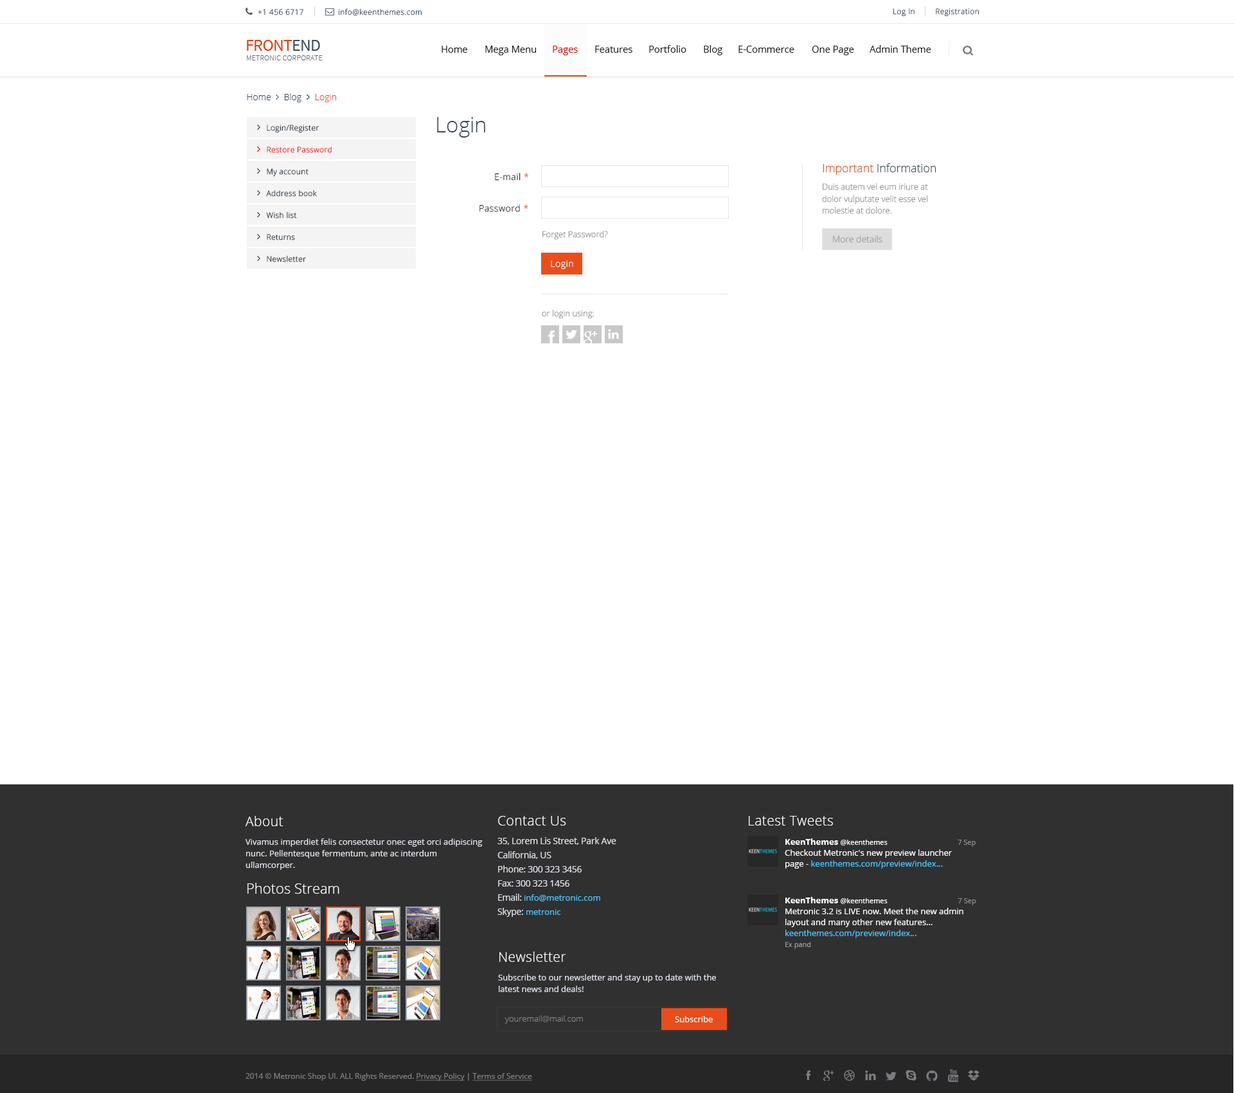
<style>
.page{position:relative;width:1234px;height:1093px;background:#ffffff}
.page>*{position:absolute;margin:0}
.t1{font:7.7px "OpenSans-Light";letter-spacing:0.04em;color:#394c60}
.t2{font:9.4px "OpenSans";color:#1f1c1c}
.t3{font:9.4px "OpenSans";color:#dd0000}
.t4{font:9px "OpenSans-Light";color:#394c60}
.t5{font:9px "OpenSans-Light";color:#e94d1c}
.t6{font:7.7px "OpenSans-Light";letter-spacing:0.03em;color:#394753}
.t7{font:21.2px "OpenSans-Light";color:#3a4855}
.t8{font:7.7px "OpenSans-Light";letter-spacing:0.03em;color:#ff0000}
.t9{font:9px "OpenSans-Light";letter-spacing:0.04em}
.t10{font:11.4px "OpenSans-Light";color:#3a4855}
.t11{font:11.4px "OpenSans-Light";color:#e94d1c}
.t12{font:8.4px/12px "OpenSans-Light";color:#999999}
.t13{font:8.4px "OpenSans-Light";color:#999999}
.t14{font:9px "OpenSans-Light";color:#999999}
.t15{font:9px "OpenSans-Light";letter-spacing:0.04em;color:#ffffff}
.t16{font:13.5px "OpenSans-Light";letter-spacing:0.02em;color:#fefefe}
.t17{font:13.5px "OpenSans-Light";letter-spacing:0.02em;color:#ffffff}
.t18{font:8.4px/11.6px "OpenSans";color:#dee4eb}
.t19{font:9px/14.1px "OpenSans";letter-spacing:-0.02em;color:#dee4eb}
.t20{font:8.4px/10.9px "OpenSans";color:#47c7ff}
.t21{font:8.4px/10.9px "OpenSans";color:#ffffff}
.t22{font:8.4px/10.9px "OpenSans-Bold";color:#ffffff}
.t23{font:7.1px/10.9px "OpenSans";color:#ffffff}
.t24{font:7.1px/10.9px "OpenSans";color:#8d8d8d}
.t25{font:14.1px "OpenSans-Light";color:#fefefe}
.t26{font:7.1px/10.9px "OpenSans";color:#999999}
.t27{font:8.4px "OpenSans-Light";color:#858585}
.t28{font:8.4px "OpenSans";color:#ffffff}
.t29{font:7.7px "OpenSans";color:#7f7f7f}
.t30{font:7.7px "OpenSans";color:#7f7f7f;text-decoration:underline}
</style>
<div class="page">
<p class="t1" style="left:258px;top:8px;width:164px;height:8px">+1 456 6717                info@keenthemes.com</p>
<p class="t1" style="left:894px;top:8px;width:85px;height:9px">Log In        Registration</p>
<p class="t2" style="left:442px;top:46px;width:25px;height:7px">Home</p>
<p class="t2" style="left:485px;top:46px;width:51px;height:9px">Mega Menu</p>
<p class="t3" style="left:553px;top:46px;width:25px;height:9px">Pages</p>
<p class="t2" style="left:595px;top:46px;width:38px;height:7px">Features</p>
<p class="t2" style="left:649px;top:45px;width:38px;height:8px">Portfolio</p>
<p class="t2" style="left:704px;top:45px;width:19px;height:10px">Blog</p>
<p class="t2" style="left:739px;top:46px;width:56px;height:7px">E-Commerce</p>
<p class="t2" style="left:812px;top:46px;width:42px;height:9px">One Page</p>
<p class="t2" style="left:870px;top:45px;width:62px;height:8px">Admin Theme</p>
<p class="t4" style="left:247px;top:93px;width:89px;height:9px">Home     Blog      <span class="t5">Login</span></p>
<p class="t6" style="left:267px;top:125px;width:53px;height:8px">Login/Register</p>
<p class="t7" style="left:437px;top:117px;width:48px;height:21px">Login</p>
<p class="t8" style="left:267px;top:146px;width:65px;height:7px">Restore Password</p>
<p class="t6" style="left:267px;top:168px;width:42px;height:9px">My account</p>
<p class="t9" style="left:495px;top:173px;width:33px;height:8px">E-mail *</p>
<p class="t10" style="left:823px;top:163px;width:113px;height:12px"><span class="t11">Important </span>Information</p>
<p class="t12" style="left:822px;top:183px;width:106px;height:31px">Duis autem vel eum iriure at <br>dolor vulputate velit esse vel <br>molestie at dolore.</p>
<p class="t6" style="left:266px;top:190px;width:51px;height:7px">Address book</p>
<p class="t9" style="left:480px;top:204px;width:48px;height:8px">Password *</p>
<p class="t6" style="left:266px;top:212px;width:31px;height:7px">Wish list</p>
<p class="t13" style="left:543px;top:230px;width:65px;height:10px">Forget Password?</p>
<p class="t6" style="left:267px;top:234px;width:28px;height:6px">Returns</p>
<p class="t14" style="left:833px;top:235px;width:50px;height:8px">More details</p>
<p class="t6" style="left:267px;top:255px;width:39px;height:7px">Newsletter</p>
<p class="t15" style="left:551px;top:260px;width:22px;height:9px">Login</p>
<p class="t13" style="left:542px;top:309px;width:52px;height:10px">or login using:</p>
<p class="t16" style="left:246px;top:816px;width:38px;height:10px">About</p>
<p class="t17" style="left:498px;top:816px;width:68px;height:9px">Contact Us</p>
<p class="t17" style="left:749px;top:816px;width:84px;height:9px">Latest Tweets</p>
<p class="t18" style="left:246px;top:838px;width:237px;height:32px">Vivamus imperdiet felis consectetur onec eget orci adipiscing nunc. Pellentesque fermentum, ante ac interdum ullamcorper.</p>
<p class="t19" style="left:498px;top:837px;width:118px;height:80px">35, Lorem Lis Street, Park Ave<br>California, US<br>Phone: 300 323 3456<br>Fax: 300 323 1456<br>Email: <span class="t20">info@metronic.com<br></span>Skype: <span class="t20">metronic</span></p>
<p class="t21" style="left:785px;top:838px;width:191px;height:31px"><span class="t22">KeenThemes </span><span class="t23">@keenthemes         </span><span class="t24">7 Sep<br></span>Checkout Metronic's new preview launcher <br>page - <span class="t20">keenthemes.com/preview/index…</span></p>
<p class="t25" style="left:248px;top:883px;width:91px;height:11px">Photos Stream</p>
<p class="t21" style="left:786px;top:897px;width:191px;height:52px"><span class="t22">KeenThemes </span><span class="t23">@keenthemes           </span><span class="t24">7 Sep<br></span>Metronic 3.2 is LIVE now. Meet the new admin layout and many other new features... <span class="t20">keenthemes.com/preview/index…<br></span><span class="t26">Ex pand</span></p>
<p class="t17" style="left:500px;top:951px;width:66px;height:11px">Newsletter</p>
<p class="t18" style="left:498px;top:974px;width:218px;height:18px">Subscribe to our newsletter and stay up to date with the latest news and deals!</p>
<p class="t27" style="left:505px;top:1015px;width:78px;height:8px">youremail@mail.com</p>
<p class="t28" style="left:675px;top:1016px;width:38px;height:6px">Subscribe</p>
<p class="t29" style="left:246px;top:1073px;width:286px;height:8px">2014 © Metronic Shop UI. ALL Rights Reserved. <span class="t30">Privacy Policy</span> | <span class="t30">Terms of Service</span></p>
</div>
